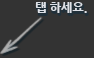
<style>
.page{position:relative;width:94px;height:58px;background:#333333}
.page>*{position:absolute;margin:0}
.t1{font:12px "NanumGothicExtraBold";color:#dee1e7}
</style>
<div class="page">
<p class="t1" style="left:35px;top:2px;width:52px;height:11px">탭 하세요.</p>
</div>
